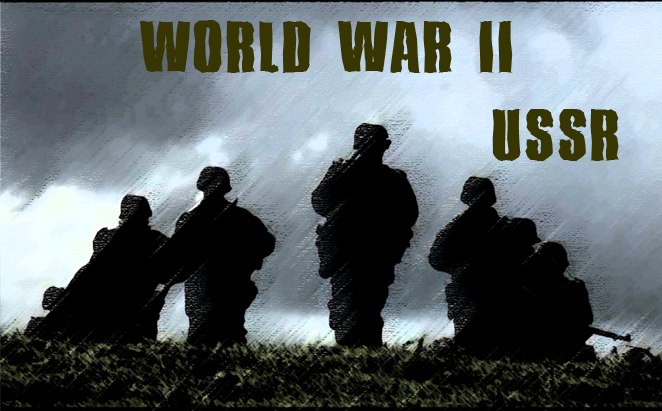
<style>
.page{position:relative;width:662px;height:411px;background:#000000}
.page>*{position:absolute;margin:0}
.t1{font:70.3px "PlaketteAntiqueXbold";letter-spacing:0.05em;color:#373602}
</style>
<div class="page">
<p class="t1" style="left:139px;top:20px;width:374px;height:53px">WORLD WAR II</p>
<p class="t1" style="left:492px;top:109px;width:127px;height:52px">USSR</p>
</div>
